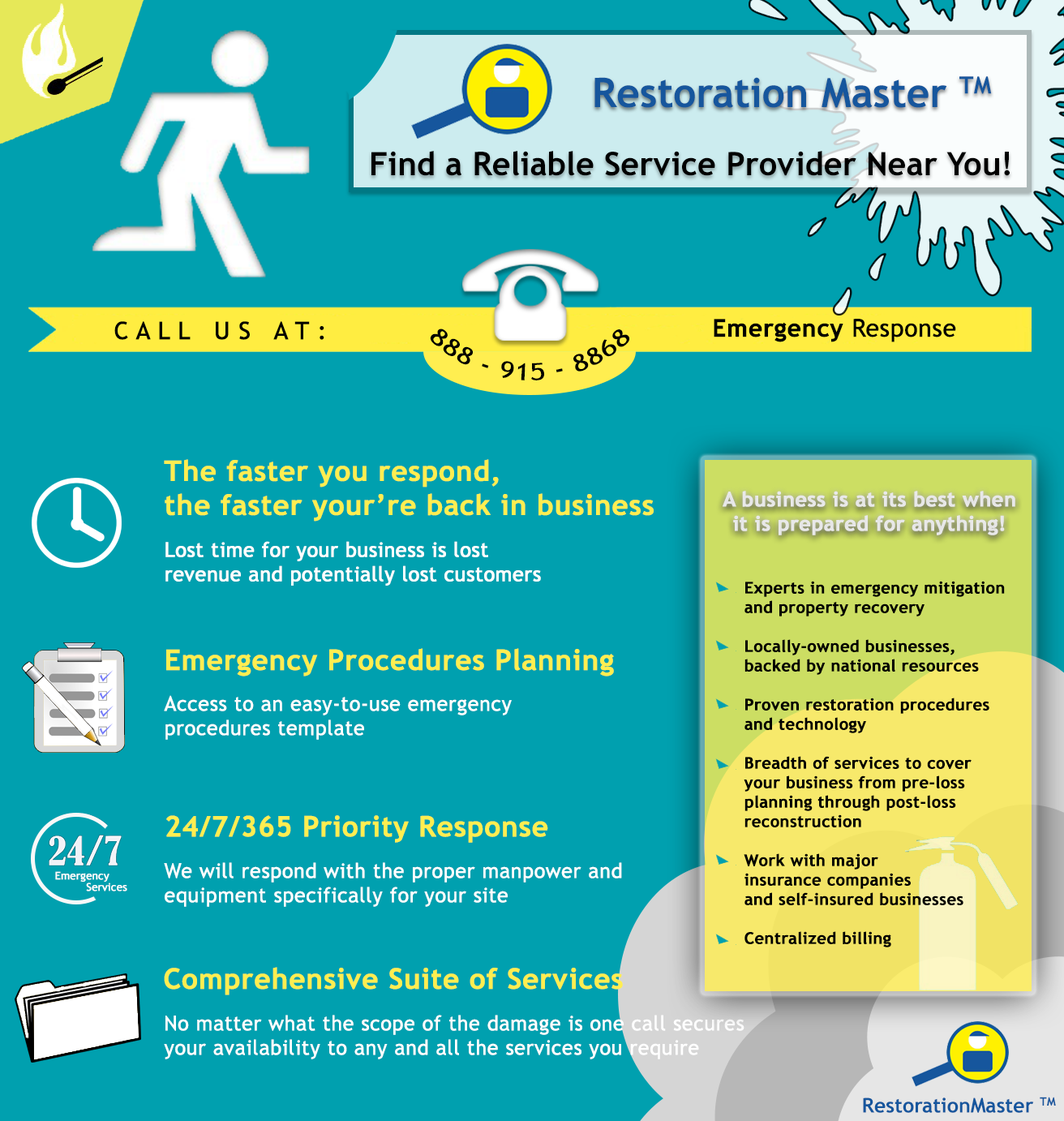
<style>
.page{position:relative;width:1064px;height:1121px;background:#00a0af}
.page>*{position:absolute;margin:0}
.t1{font:40.5px "TrebuchetMS-Bold";color:#16569d}
.t2{font:32.4px "TrebuchetMS-Bold";color:#000000}
.t3{font:24.3px "TrebuchetMS";letter-spacing:0.002em;color:#000000;font-weight:bold}
.t4{font:24.3px "TrebuchetMS";letter-spacing:0.002em;color:#000000}
.t5{font:24.3px "TrebuchetMS-Bold";letter-spacing:0.002em;color:#000000;font-weight:bold}
.t6{font:28.4px "TrebuchetMS-Bold";letter-spacing:0.002em;color:#ffee50;font-weight:bold}
.t7{font:20.3px "TrebuchetMS-Bold";letter-spacing:0.002em;color:#e9e9e9;font-weight:bold}
.t8{font:20.3px "TrebuchetMS";letter-spacing:0.002em;color:#ffffff;font-weight:bold}
.t9{font:16.2px "TrebuchetMS-Bold";letter-spacing:0.002em;color:#000000;font-weight:bold}
.t10{font:20.2px "TrebuchetMS";letter-spacing:0.002em;color:#ffffff;font-weight:bold}
.t11{font:10.5px/11.4px "TrebuchetMS";letter-spacing:0.002em;color:#ffffff;font-weight:bold}
.t12{font:20.3px "TrebuchetMS-Bold";color:#16569d}
</style>
<div class="page">
<p class="t1" style="left:594px;top:76px;width:398px;height:32px">Restoration Master TM</p>
<p class="t2" style="left:371px;top:151px;width:639px;height:25px">Find a Reliable Service Provider Near You!</p>
<p class="t3" style="left:114px;top:321px;width:210px;height:19px">C A L L   U S   A T :</p>
<p class="t4" style="left:430px;top:328px;width:199px;height:52px">888 - 915 - 8868</p>
<p class="t5" style="left:714px;top:319px;width:242px;height:23px">Emergency<span class="t3"> Response</span></p>
<p class="t6" style="left:164px;top:459px;width:490px;height:62px">The faster you respond, <br>the faster your’re back in business</p>
<p class="t7" style="left:723px;top:491px;width:292px;height:44px;text-align:center">A business is at its best when it is prepared for anything!</p>
<p class="t8" style="left:165px;top:541px;width:376px;height:45px">Lost time for your business is lost revenue and potentially lost customers</p>
<p class="t9" style="left:744px;top:581px;width:261px;height:366px">Experts in emergency mitigation and property recovery<br><br>Locally-owned businesses,<br>backed by national resources<br><br>Proven restoration procedures<br>and technology<br><br>Breadth of services to cover<br>your business from pre-loss<br>planning through post-loss<br>reconstruction<br><br>Work with major<br>insurance companies<br>and self-insured businesses<br><br>Centralized billing</p>
<p class="t6" style="left:166px;top:648px;width:448px;height:28px">Emergency Procedures Planning</p>
<p class="t10" style="left:164px;top:695px;width:348px;height:45px">Access to an easy-to-use emergency<br>procedures template</p>
<p class="t6" style="left:166px;top:815px;width:382px;height:28px">24/7/365 Priority Response</p>
<p class="t8" style="left:164px;top:862px;width:458px;height:45px">We will respond with the proper manpower and<br>equipment specifically for your site</p>
<p class="t11" style="left:55px;top:871px;width:72px;height:20px">Emergency <br>         Services</p>
<p class="t6" style="left:164px;top:967px;width:459px;height:28px">Comprehensive Suite of Services</p>
<p class="t10" style="left:164px;top:1015px;width:580px;height:44px">No matter what the scope of the damage is one call secures your availability to any and all the services you require</p>
<p class="t12" style="left:863px;top:1096px;width:193px;height:17px">RestorationMaster TM</p>
</div>
